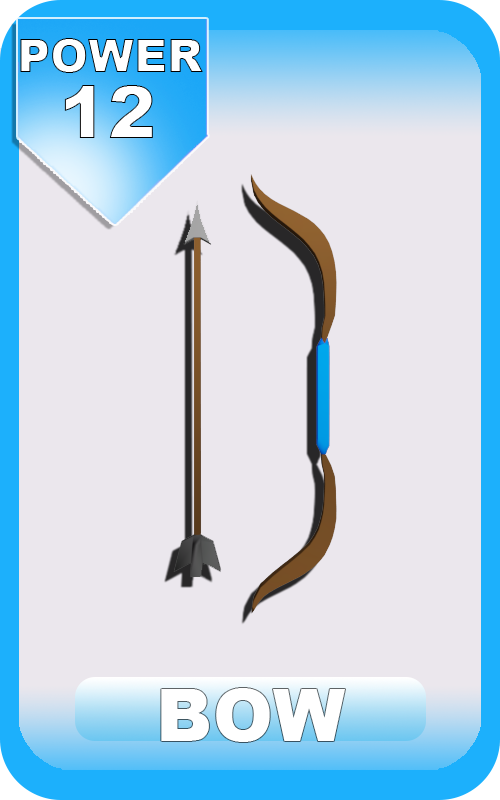
<style>
.page{position:relative;width:500px;height:800px;background:#ebe7ed}
.page>*{position:absolute;margin:0}
.t1{font:46px "Arial-Black";color:#ffffff}
.t2{font:72px "Arial-Black";letter-spacing:0.01em;color:#ffffff}
</style>
<div class="page">
<p class="t1" style="left:20px;top:38px;width:183px;height:35px">POWER</p>
<p class="t2" style="left:64px;top:85px;width:89px;height:53px">12</p>
<p class="t2" style="left:161px;top:688px;width:184px;height:54px">BOW</p>
</div>
